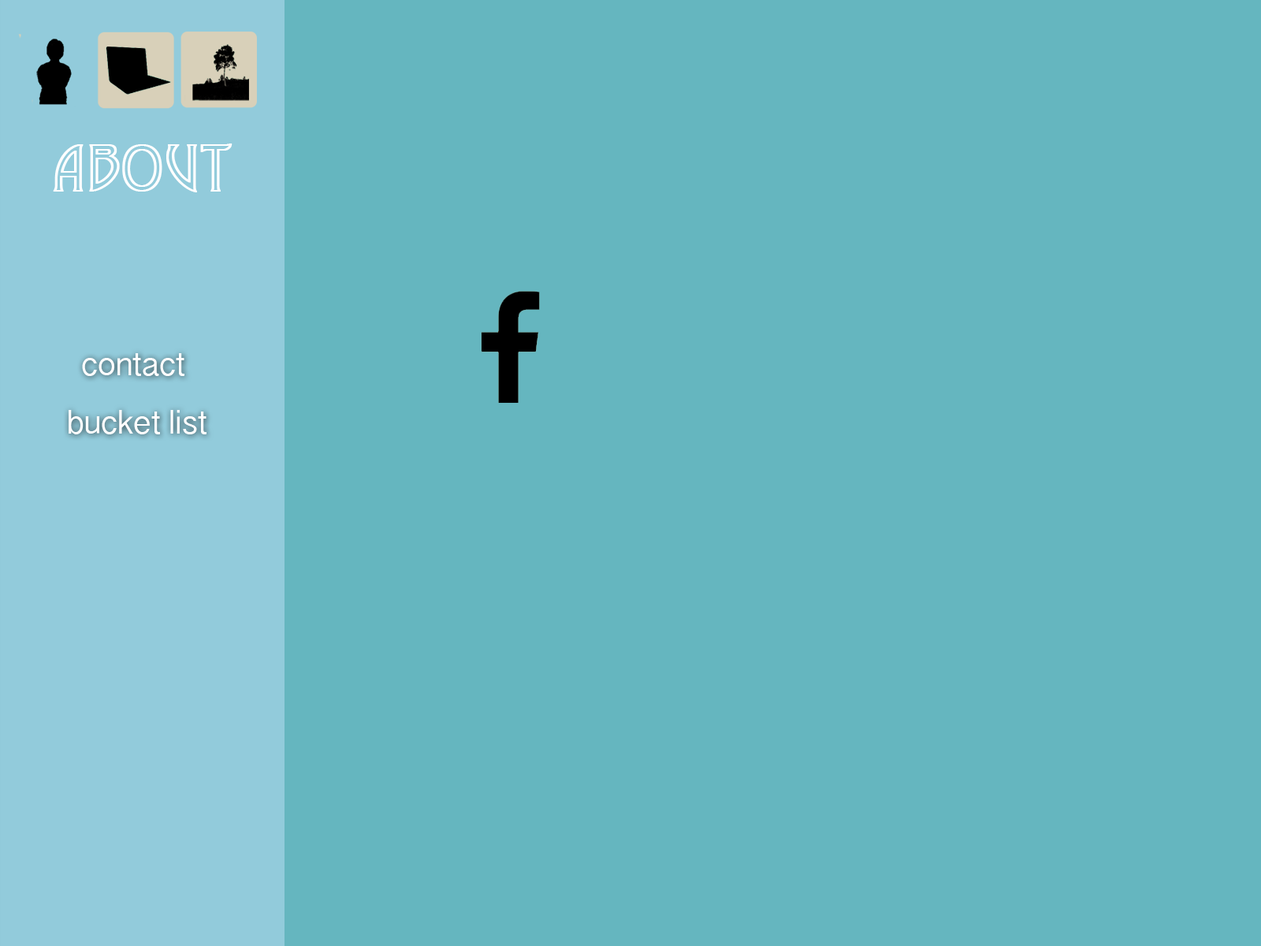
<style>
.page{position:relative;width:1261px;height:946px;background:#65b6bf}
.page>*{position:absolute;margin:0}
.t1{font:63px "Desdemona";color:#ffffff;font-weight:bold}
.t2{font:31.5px "KannadaSangamMN";color:#ffffff}
</style>
<div class="page">
<p class="t1" style="left:53px;top:143px;width:179px;height:49px">about</p>
<p class="t2" style="left:82px;top:353px;width:102px;height:23px">contact</p>
<p class="t2" style="left:69px;top:410px;width:137px;height:24px">bucket list</p>
</div>
